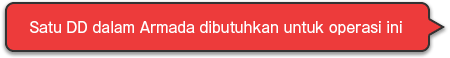
<style>
.page{position:relative;width:450px;height:58px;background:#ed3b3b}
.page>*{position:absolute;margin:0}
.t1{font:14px "GothicMB101Pro-Regular";color:#ffffff}
</style>
<div class="page">
<p class="t1" style="left:30px;top:21px;width:372px;height:14px">Satu DD dalam Armada dibutuhkan untuk operasi ini</p>
</div>
